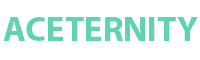
<style>
.page{position:relative;width:200px;height:60px;background:#ffffff}
.page>*{position:absolute;margin:0}
.t1{font:35px "MyriadPro-Bold";color:#61d2b4}
</style>
<div class="page">
<p class="t1" style="left:3px;top:17px;width:195px;height:24px">ACETERNITY</p>
</div>
